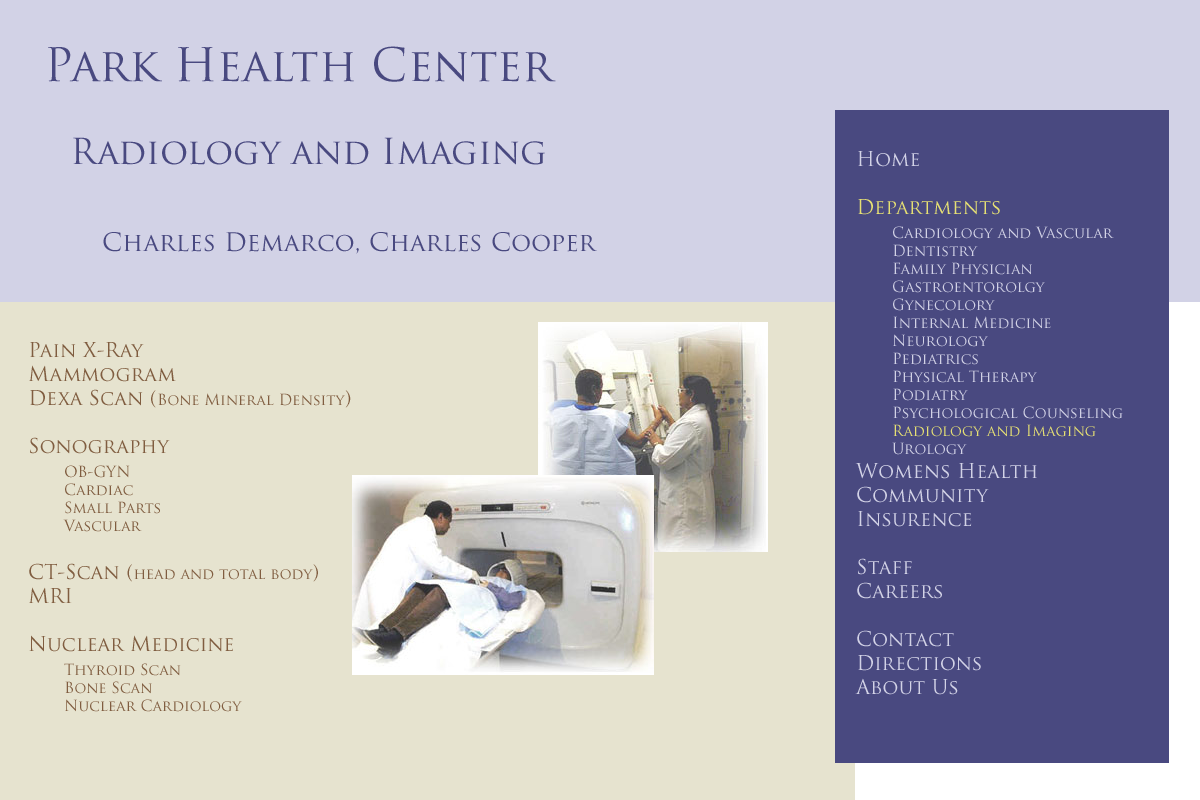
<style>
.page{position:relative;width:1200px;height:800px;background:#e6e3cf}
.page>*{position:absolute;margin:0}
.t1{font:45px "TrajanPro-Regular";color:#494980}
.t2{font:35px "TrajanPro-Regular";color:#494980}
.t3{font:15px "TrajanPro-Regular";color:#d2d2e6}
.t4{font:20px "TrajanPro-Regular";color:#d2d2e6}
.t5{font:20px "TrajanPro-Regular";color:#e6e073}
.t6{font:15px "TrajanPro-Regular";color:#e6e073}
.t7{font:25px "TrajanPro-Regular";color:#494980}
.t8{font:15px "TrajanPro-Regular";color:#805d40}
.t9{font:20px "TrajanPro-Regular";color:#805d40}
</style>
<div class="page">
<p class="t1" style="left:48px;top:46px;width:508px;height:36px">Park Health Center</p>
<p class="t2" style="left:73px;top:137px;width:472px;height:28px">Radiology and Imaging</p>
<p class="t3" style="left:855px;top:151px;width:268px;height:544px"><span class="t4">Home<br><br></span><span class="t5">Departments<br> </span>Cardiology and Vascular<br> Dentistry<br> Family Physician<br> Gastroentorolgy<br> Gynecolory<br> Internal Medicine<br> Neurology<br> Pediatrics<br> Physical Therapy<br> Podiatry<br> Psychological Counseling<br> <span class="t6">Radiology and Imaging<br></span> Urology<br><span class="t4">Womens Health<br>Community<br>Insurence<br><br>Staff<br>Careers<br><br>Contact<br>Directions<br>About Us</span></p>
<p class="t7" style="left:103px;top:232px;width:494px;height:22px">Charles Demarco, Charles Cooper</p>
<p class="t8" style="left:29px;top:342px;width:322px;height:370px"><span class="t9">Pain X-Ray<br>Mammogram<br>Dexa Scan (</span>Bone Mineral Density<span class="t9">)<br><br>Sonography<br> </span>OB-GYN<br> Cardiac<br> Small Parts<br> Vascular<span class="t9"><br><br>CT-Scan (</span>head and total body<span class="t9">)<br>MRI<br><br>Nuclear Medicine<br> </span>Thyroid Scan<br> Bone Scan<br> Nuclear Cardiology</p>
</div>
